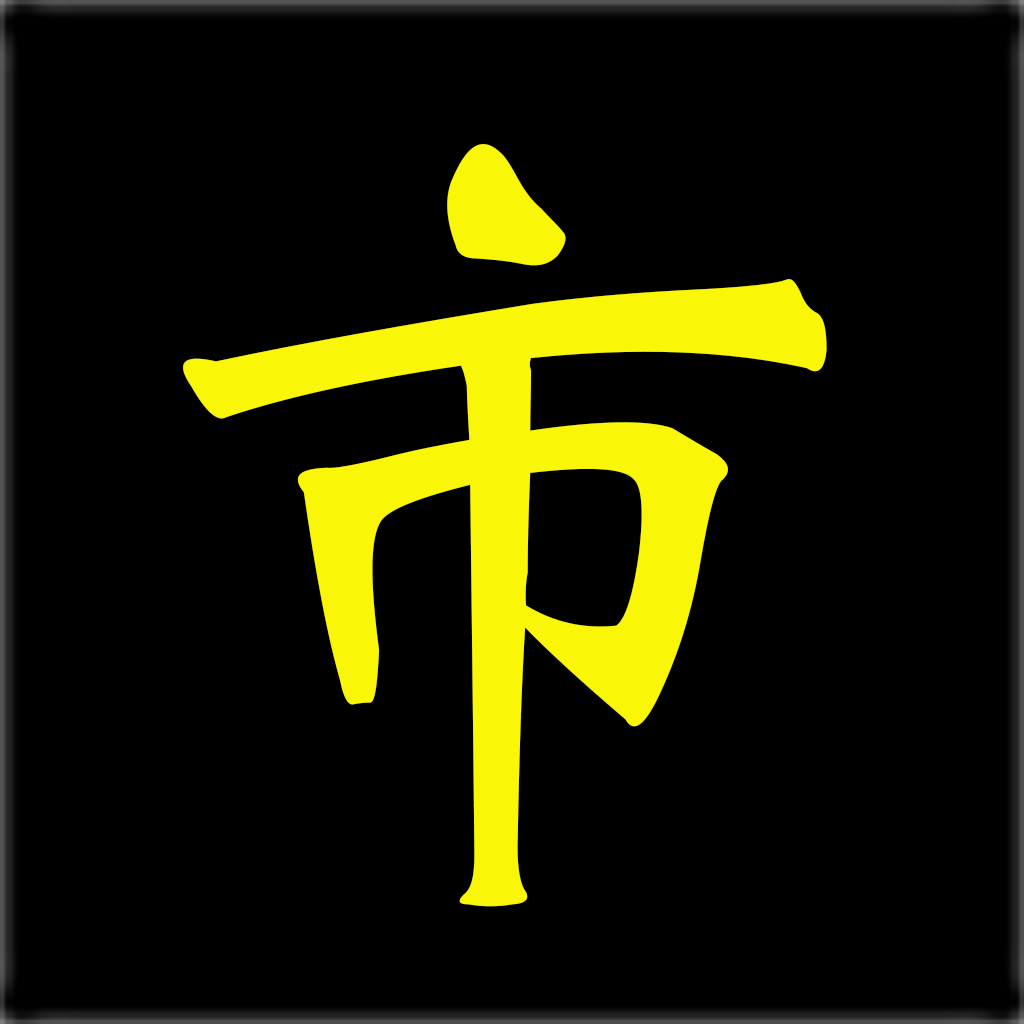
<style>
.page{position:relative;width:1024px;height:1024px;background:#000000}
.page>*{position:absolute;margin:0}
.t1{font:844.4px "Weibei-SC-Bold";color:#f9f607}
</style>
<div class="page">
<p class="t1" style="left:183px;top:144px;width:644px;height:763px">市</p>
</div>
